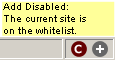
<style>
.page{position:relative;width:115px;height:60px;background:#ffff99}
.page>*{position:absolute;margin:0}
.t1{font:10px "ArialMT";color:#000000}
</style>
<div class="page">
<p class="t1" style="left:3px;top:3px;width:83px;height:31px">Add Disabled:<br>The current site is<br>on the whitelist.</p>
</div>
